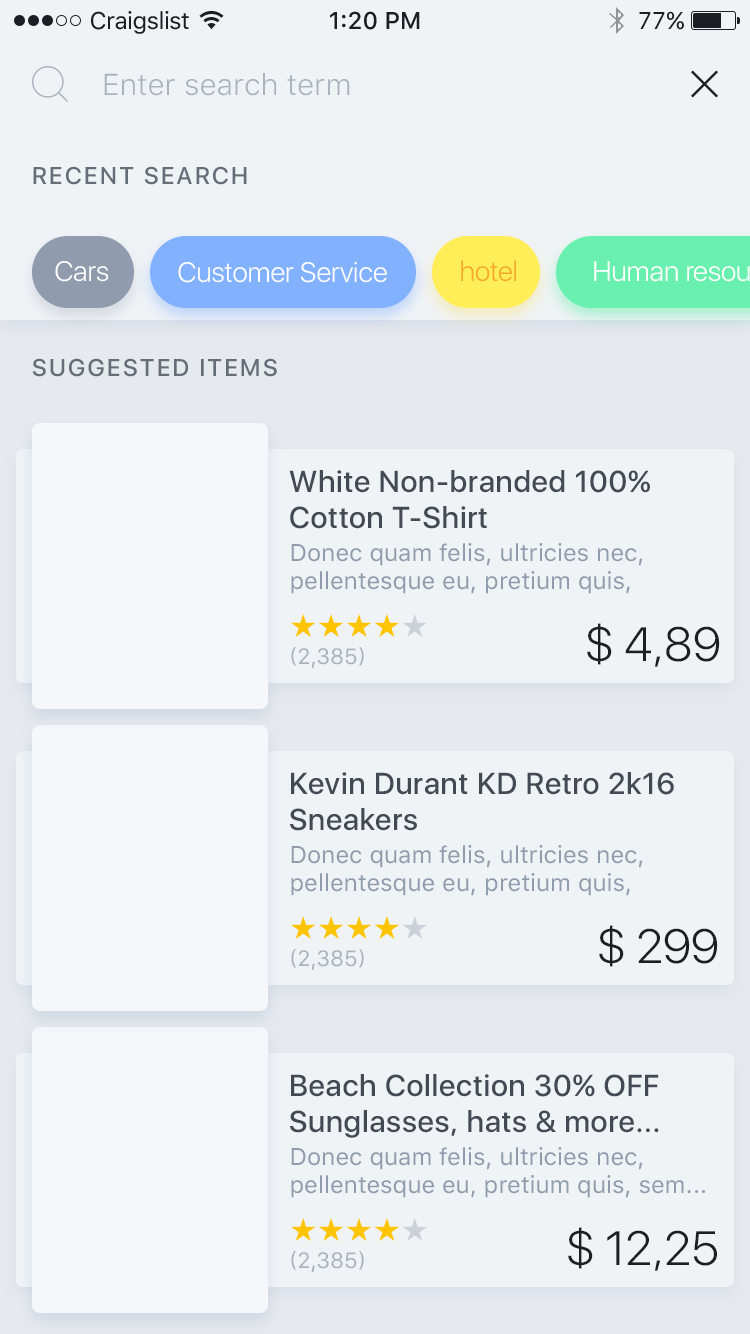
<style>
.page{position:relative;width:750px;height:1334px;background:#f0f3f6}
.page>*{position:absolute;margin:0}
.t1{font:24px "SFUIText-Regular";letter-spacing:-0.025em;color:#1b1e23}
.t2{font:24px "SFUIText-Medium";color:#1b1e23}
.t3{font:24px "SFUIText-Regular";color:#1b1e23}
.t4{font:30px "SFUIText-Light";color:#aab2bd}
.t5{font:24px "SFUIDisplay-Medium";letter-spacing:0.1em;color:#656d78;text-transform:uppercase}
.t6{font:28px "SFUIDisplay-Light";color:#ffffff}
.t7{font:28px "SFUIDisplay-Light";color:#f9a825}
.t8{font:30px "SFUIDisplay-Medium";letter-spacing:0.025em;color:#434a54}
.t9{font:24px "SFUIText-Regular";color:#909bad}
.t10{font:48px "SFUIDisplay-Light";color:#1b1e23}
.t11{font:22px "SFUIText-Regular";color:#aab2bd;text-transform:uppercase}
</style>
<div class="page">
<p class="t1" style="left:91px;top:11px;width:98px;height:23px">Craigslist</p>
<p class="t2" style="left:330px;top:11px;width:90px;height:19px">1:20 PM</p>
<p class="t3" style="left:639px;top:11px;width:45px;height:19px">77%</p>
<p class="t4" style="left:104px;top:73px;width:246px;height:23px">Enter search term</p>
<p class="t5" style="left:33px;top:166px;width:214px;height:19px">Recent search</p>
<p class="t6" style="left:55px;top:261px;width:54px;height:21px">Cars</p>
<p class="t6" style="left:178px;top:262px;width:209px;height:21px">Customer Service</p>
<p class="t7" style="left:461px;top:260px;width:55px;height:22px">hotel</p>
<p class="t5" style="left:32px;top:358px;width:245px;height:19px">Suggested items</p>
<p class="t8" style="left:289px;top:470px;width:361px;height:59px">White Non-branded 100% Cotton T-Shirt</p>
<p class="t9" style="left:291px;top:543px;width:352px;height:51px">Donec quam felis, ultricies nec, pellentesque eu, pretium quis, sem... Nulla consequat massa quis enim.</p>
<p class="t10" style="left:587px;top:623px;width:133px;height:44px">$ 4,89</p>
<p class="t11" style="left:291px;top:647px;width:73px;height:21px">(2,385)</p>
<p class="t8" style="left:290px;top:772px;width:384px;height:59px">Kevin Durant KD Retro 2k16 Sneakers</p>
<p class="t9" style="left:291px;top:845px;width:352px;height:51px">Donec quam felis, ultricies nec, pellentesque eu, pretium quis, sem... Nulla consequat massa quis enim.</p>
<p class="t10" style="left:599px;top:925px;width:119px;height:42px">$ 299</p>
<p class="t11" style="left:291px;top:949px;width:73px;height:21px">(2,385)</p>
<p class="t8" style="left:290px;top:1074px;width:369px;height:64px">Beach Collection 30% OFF<br>Sunglasses, hats &amp; more...</p>
<p class="t9" style="left:291px;top:1147px;width:414px;height:51px">Donec quam felis, ultricies nec, pellentesque eu, pretium quis, sem... Nulla consequat massa quis enim.</p>
<p class="t10" style="left:568px;top:1227px;width:149px;height:44px">$ 12,25</p>
<p class="t11" style="left:291px;top:1251px;width:73px;height:21px">(2,385)</p>
</div>
